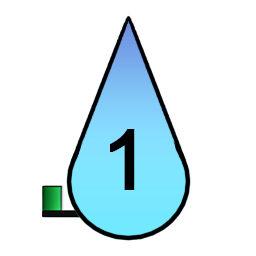
<style>
.page{position:relative;width:256px;height:256px;background:#ffffff}
.page>*{position:absolute;margin:0}
.t1{font:83.3px "ArialMT";color:#000000;font-weight:bold}
</style>
<div class="page">
<p class="t1" style="left:110px;top:129px;width:25px;height:61px">1</p>
</div>
